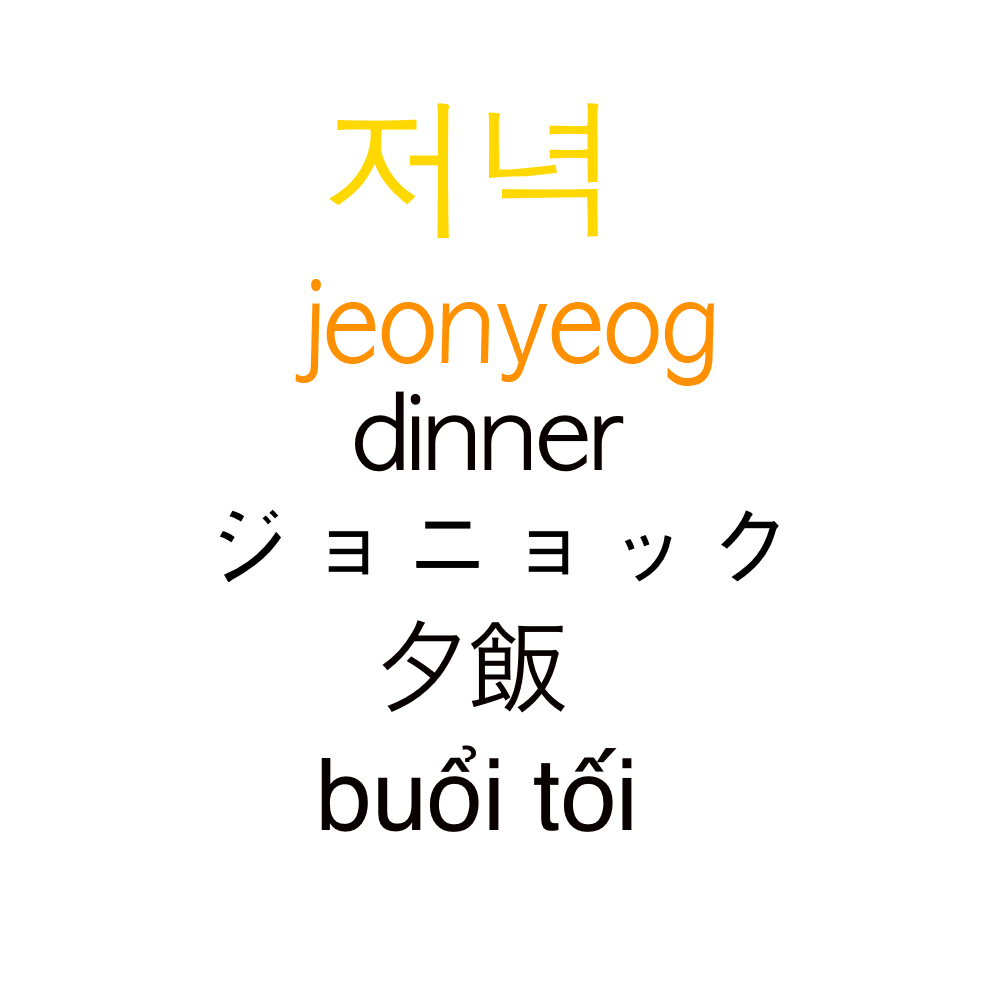
<style>
.page{position:relative;width:1000px;height:1000px;background:#ffffff}
.page>*{position:absolute;margin:0}
.t1{font:150px "AppleGothic";color:#ffd800}
.t2{font:111.2px "AppleGothic";color:#ff9000;scale:0.9 1}
.t3{font:100px "AppleGothic";color:#080000}
.t4{font:100px "AppleGothic";color:#000000}
.t5{font:100px "HiraKakuProN-W3";color:#080000}
.t6{font:100px "Helvetica";color:#080000}
</style>
<div class="page">
<p class="t1" style="left:329px;top:103px;width:270px;height:136px">저녁</p>
<p class="t2" style="left:295px;top:279px;width:419px;height:107px">jeonyeog</p>
<p class="t3" style="left:355px;top:391px;width:269px;height:81px">dinner</p>
<p class="t4" style="left:220px;top:509px;width:559px;height:73px">ジョニョック</p>
<p class="t5" style="left:382px;top:620px;width:183px;height:93px">夕飯</p>
<p class="t6" style="left:321px;top:745px;width:311px;height:87px">buổi tối</p>
</div>
